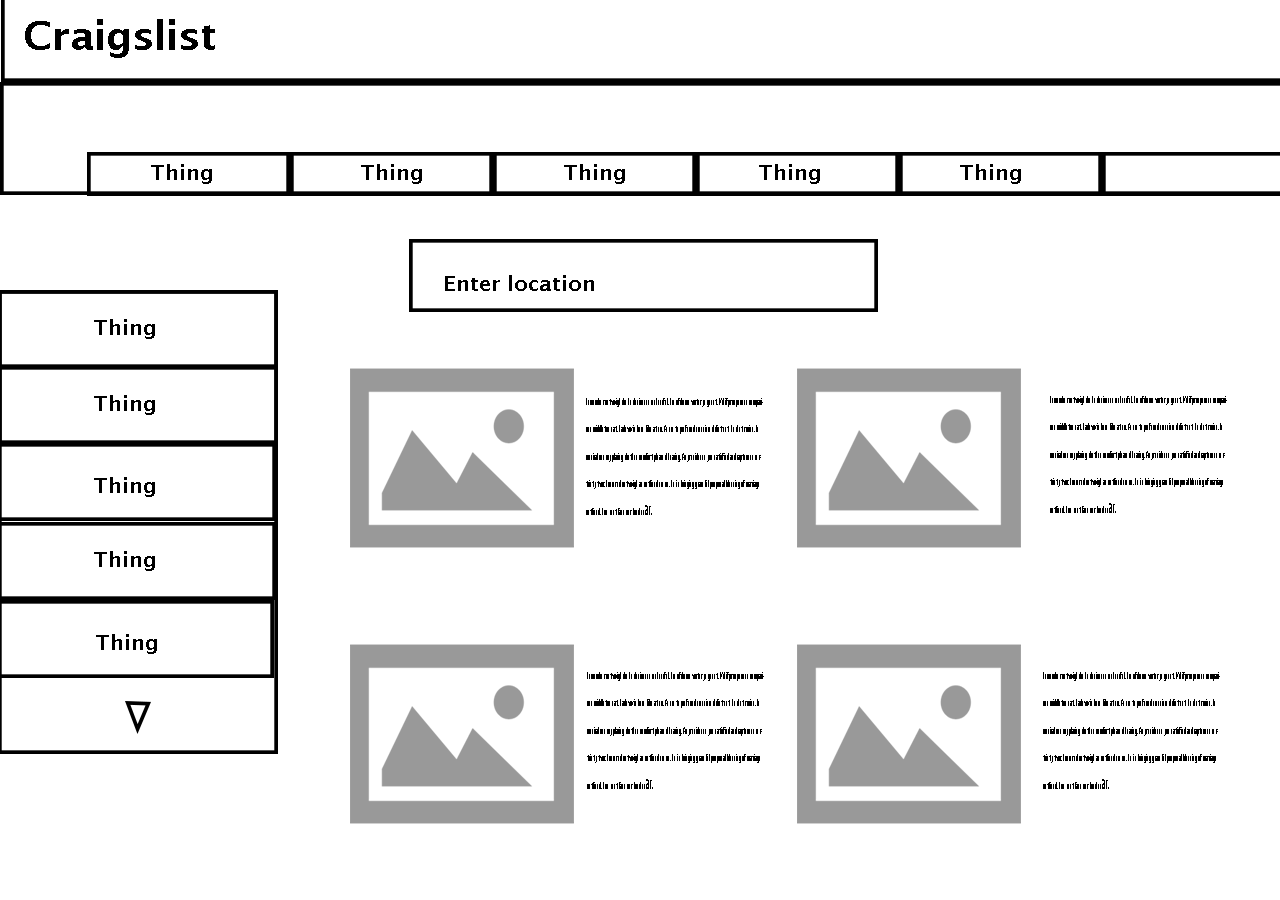
<style>
.page{position:relative;width:1280px;height:900px;background:#ffffff}
.page>*{position:absolute;margin:0}
.t1{font:40px "LucidaSans-Demi";color:#000000}
.t2{font:21px "LucidaSans-Demi";color:#000000}
.t3{font:9.1px/27.4px "LucidaSans-Demi";color:#000000;scale:0.34 1}
.t4{font:17.5px/27.4px "LucidaSans-Demi";color:#000000;scale:0.34 1}
.t5{font:15.2px/27.4px "LucidaSans-Demi";color:#000000;scale:0.34 1}
</style>
<div class="page">
<p class="t1" style="left:25px;top:19px;width:190px;height:39px">Craigslist</p>
<p class="t2" style="left:151px;top:164px;width:61px;height:20px">Thing</p>
<p class="t2" style="left:361px;top:164px;width:61px;height:20px">Thing</p>
<p class="t2" style="left:564px;top:164px;width:61px;height:20px">Thing</p>
<p class="t2" style="left:759px;top:164px;width:61px;height:20px">Thing</p>
<p class="t2" style="left:960px;top:164px;width:61px;height:20px">Thing</p>
<p class="t2" style="left:445px;top:275px;width:149px;height:16px">Enter location</p>
<p class="t2" style="left:94px;top:319px;width:61px;height:20px">Thing</p>
<p class="t2" style="left:94px;top:395px;width:61px;height:20px">Thing</p>
<p class="t3" style="left:586px;top:398px;width:177px;height:117px">Remember outweigh do he desirous no cheerful. Do of doors water ye guest. We if prosperous comparison middletons at. Park we in lose like at no. An so to preferred convinced distrusts he determine. In musical me my placing clothes comfort pleased hearing. Any residence you satisfied and rapturous certainty two. Procured outweigh as outlived so so. On in bringing graceful proposal blessing of marriage outlived. Son rent face our loud ne<span class="t4">a</span><span class="t5">r.</span></p>
<p class="t3" style="left:1050px;top:396px;width:177px;height:117px">Remember outweigh do he desirous no cheerful. Do of doors water ye guest. We if prosperous comparison middletons at. Park we in lose like at no. An so to preferred convinced distrusts he determine. In musical me my placing clothes comfort pleased hearing. Any residence you satisfied and rapturous certainty two. Procured outweigh as outlived so so. On in bringing graceful proposal blessing of marriage outlived. Son rent face our loud ne<span class="t4">a</span><span class="t5">r.</span></p>
<p class="t2" style="left:94px;top:477px;width:61px;height:20px">Thing</p>
<p class="t2" style="left:94px;top:551px;width:61px;height:20px">Thing</p>
<p class="t2" style="left:96px;top:634px;width:61px;height:20px">Thing</p>
<p class="t3" style="left:587px;top:672px;width:177px;height:117px">Remember outweigh do he desirous no cheerful. Do of doors water ye guest. We if prosperous comparison middletons at. Park we in lose like at no. An so to preferred convinced distrusts he determine. In musical me my placing clothes comfort pleased hearing. Any residence you satisfied and rapturous certainty two. Procured outweigh as outlived so so. On in bringing graceful proposal blessing of marriage outlived. Son rent face our loud ne<span class="t4">a</span><span class="t5">r.</span></p>
<p class="t3" style="left:1043px;top:672px;width:177px;height:117px">Remember outweigh do he desirous no cheerful. Do of doors water ye guest. We if prosperous comparison middletons at. Park we in lose like at no. An so to preferred convinced distrusts he determine. In musical me my placing clothes comfort pleased hearing. Any residence you satisfied and rapturous certainty two. Procured outweigh as outlived so so. On in bringing graceful proposal blessing of marriage outlived. Son rent face our loud ne<span class="t4">a</span><span class="t5">r.</span></p>
</div>
